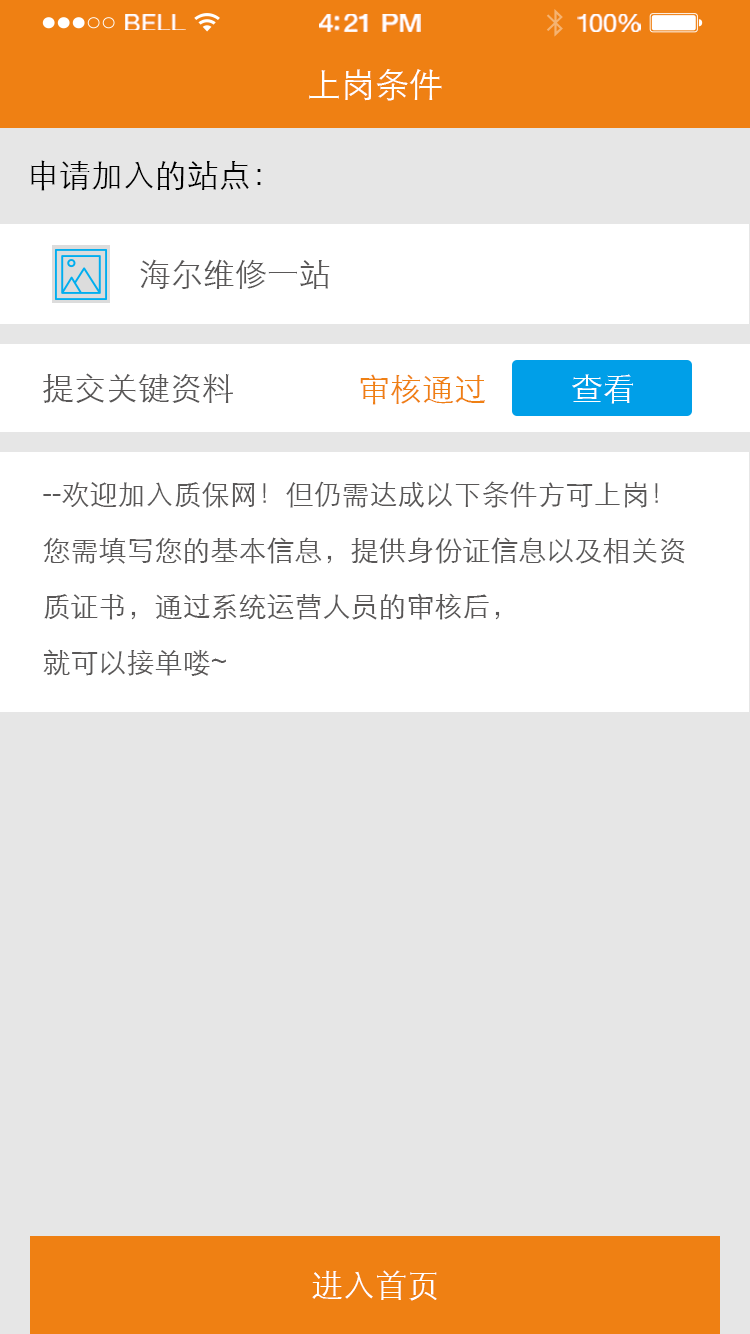
<style>
.page{position:relative;width:750px;height:1334px;background:#e6e6e6}
.page>*{position:absolute;margin:0}
.t1{font:23.3px "HelveticaNeue";letter-spacing:0.02em;color:#ffffff;scale:1.06 1}
.t2{font:25.3px "HelveticaNeue-Medium";letter-spacing:-0.02em;color:#ffffff;scale:1.06 1}
.t3{font:24.3px "HelveticaNeue";letter-spacing:-0.02em;color:#ffffff;scale:1.06 1}
.t4{font:34px "STXihei";color:#ffffff}
.t5{font:32px "STXihei";color:#000000}
.t6{font:32px "STXihei";color:#595757}
.t7{font:32px "STXihei";color:#ef8013}
.t8{font:32px "STXihei";color:#ffffff}
.t9{font:28px/56px "STXihei";color:#595757}
</style>
<div class="page">
<p class="t1" style="left:125px;top:14px;width:61px;height:16px">BELL</p>
<p class="t2" style="left:319px;top:14px;width:102px;height:18px">4:21 PM</p>
<p class="t3" style="left:577px;top:14px;width:64px;height:18px">100%</p>
<p class="t4" style="left:309px;top:69px;width:133px;height:32px">上岗条件</p>
<p class="t5" style="left:31px;top:160px;width:230px;height:31px">申请加入的站点：</p>
<p class="t6" style="left:140px;top:259px;width:190px;height:30px">海尔维修一站</p>
<p class="t6" style="left:43px;top:373px;width:190px;height:30px">提交关键资料</p>
<p class="t7" style="left:360px;top:374px;width:125px;height:31px">审核通过</p>
<p class="t8" style="left:572px;top:374px;width:61px;height:30px">查看</p>
<p class="t9" style="left:43px;top:481px;width:642px;height:195px">--欢迎加入质保网！但仍需达成以下条件方可上岗！<br>您需填写您的基本信息，提供身份证信息以及相关资质证书，通过系统运营人员的审核后，<br>就可以接单喽~</p>
<p class="t8" style="left:312px;top:1270px;width:125px;height:31px">进入首页</p>
</div>
